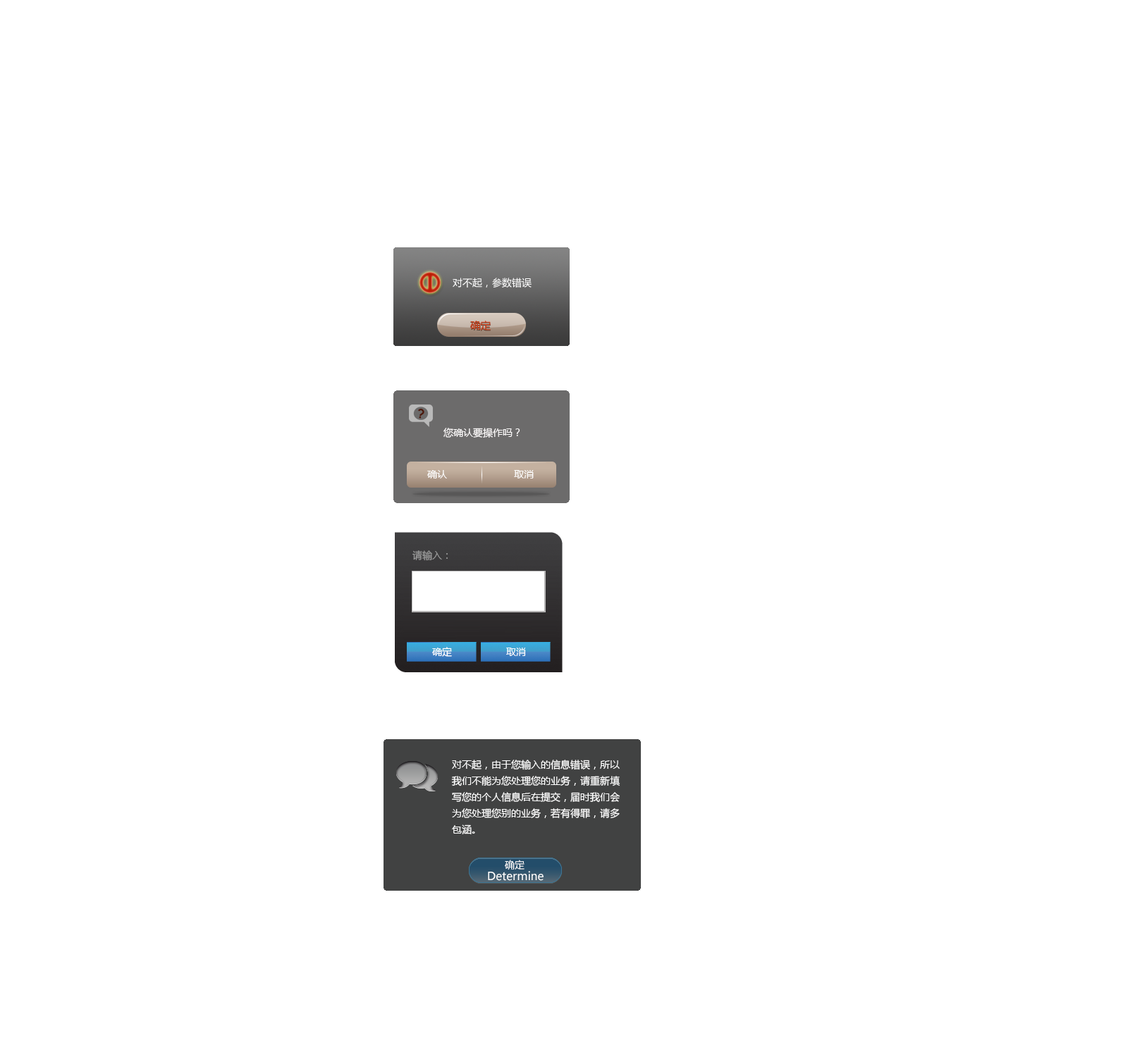
<style>
.page{position:relative;width:1128px;height:1057px;background:#ffffff}
.page>*{position:absolute;margin:0}
.t1{font:9.9px "MicrosoftYaHei";color:#ffffff}
.t2{font:10.3px "MicrosoftYaHei";color:#cc401a}
.t3{font:9.9px "MicrosoftYaHei";color:#fdfbfb}
.t4{font:9.9px "MicrosoftYaHei";color:#9b9b9b}
.t5{font:9.9px/16.2px "MicrosoftYaHei";color:#ffffff}
.t6{font:11.3px "MicrosoftYaHei";color:#ffffff}
</style>
<div class="page">
<p class="t1" style="left:453px;top:278px;width:78px;height:10px">对不起，参数错误</p>
<p class="t2" style="left:470px;top:321px;width:21px;height:10px">确定</p>
<p class="t3" style="left:443px;top:428px;width:77px;height:10px">您确认要操作吗？</p>
<p class="t1" style="left:427px;top:470px;width:107px;height:9px">确认                       取消</p>
<p class="t4" style="left:412px;top:551px;width:36px;height:10px">请输入：</p>
<p class="t1" style="left:432px;top:647px;width:20px;height:10px">确定</p>
<p class="t1" style="left:506px;top:648px;width:20px;height:8px">取消</p>
<p class="t5" style="left:451px;top:760px;width:169px;height:75px;text-align:justify">对不起，由于您输入的信息错误，所以<br>我们不能为您处理您的业务，请重新填<br>写您的个人信息后在提交，届时我们会<br>为您处理您别的业务，若有得罪，请多<br>包涵。</p>
<p class="t1" style="left:505px;top:860px;width:19px;height:11px">确定</p>
<p class="t6" style="left:488px;top:871px;width:55px;height:10px">Determine</p>
</div>
